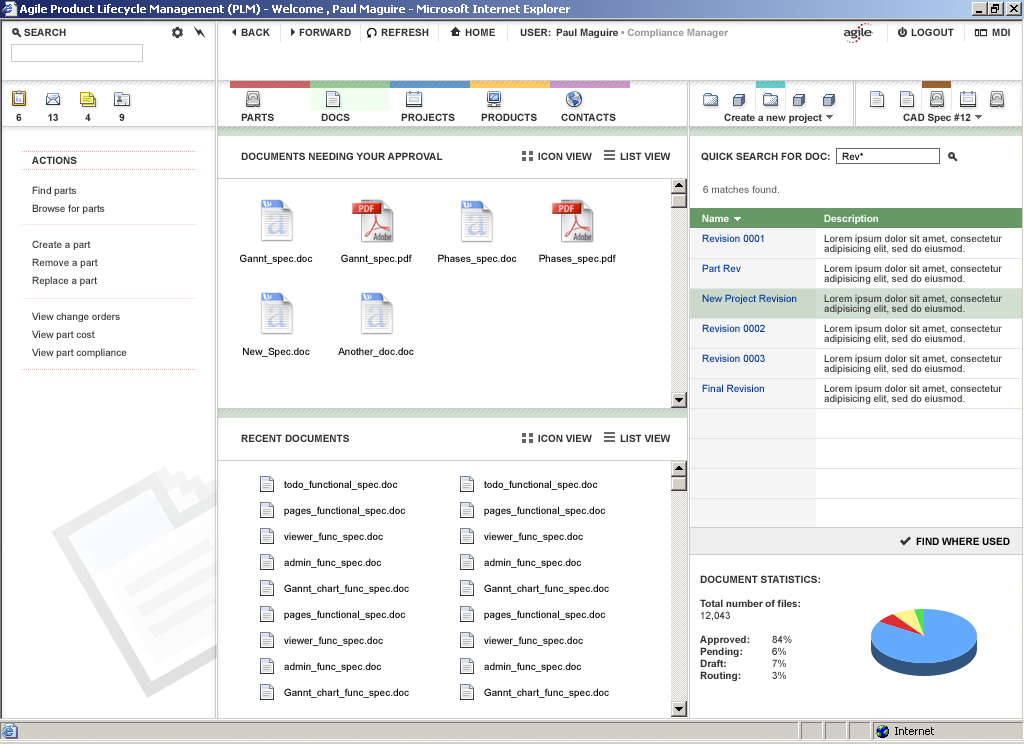
<style>
.page{position:relative;width:1024px;height:744px;background:#ffffff}
.page>*{position:absolute;margin:0}
.t1{font:10px "Arial-BoldMT";color:#333333}
.t2{font:10px "ArialMT"}
.t3{font:10px "ArialMT";color:#666666}
.t4{font:10px "Arial-BoldMT";color:#ffffff}
.t5{font:10px/10px "ArialMT";color:#003399}
.t6{font:10px/10px "ArialMT";color:#333333}
.t7{font:10px "ArialMT";color:#000000}
.t8{font:10px/26px "ArialMT";color:#000000}
.t9{font:10px "Arial-BoldMT";color:#000000}
.t10{font:10px/12px "Arial-BoldMT";color:#333333}
.t11{font:10px/12px "ArialMT";color:#333333}
</style>
<div class="page">
<p class="t1" style="left:241px;top:152px;width:202px;height:8px">DOCUMENTS NEEDING YOUR APPROVAL</p>
<p class="t1" style="left:538px;top:152px;width:54px;height:8px">ICON VIEW</p>
<p class="t1" style="left:620px;top:152px;width:51px;height:8px">LIST VIEW</p>
<p class="t1" style="left:701px;top:152px;width:129px;height:9px">QUICK SEARCH FOR DOC:</p>
<p class="t2" style="left:842px;top:152px;width:22px;height:8px">Rev*</p>
<p class="t3" style="left:703px;top:185px;width:76px;height:8px">6 matches found.</p>
<p class="t4" style="left:702px;top:214px;width:27px;height:8px">Name</p>
<p class="t4" style="left:824px;top:214px;width:54px;height:10px">Description</p>
<p class="t5" style="left:702px;top:234px;width:95px;height:158px">Revision 0001<br><br><br>Part Rev<br><br><br>New Project Revision<br><br><br>Revision 0002<br><br><br>Revision 0003<br><br><br>Final Revision</p>
<p class="t6" style="left:824px;top:234px;width:178px;height:170px">Lorem ipsum dolor sit amet, consectetur <br>adipisicing elit, sed do eiusmod.<br><br>Lorem ipsum dolor sit amet, consectetur <br>adipisicing elit, sed do eiusmod.<br><br>Lorem ipsum dolor sit amet, consectetur <br>adipisicing elit, sed do eiusmod.<br><br>Lorem ipsum dolor sit amet, consectetur <br>adipisicing elit, sed do eiusmod.<br><br>Lorem ipsum dolor sit amet, consectetur <br>adipisicing elit, sed do eiusmod.<br><br>Lorem ipsum dolor sit amet, consectetur <br>adipisicing elit, sed do eiusmod.</p>
<p class="t7" style="left:240px;top:254px;width:73px;height:10px">Gannt_spec.doc</p>
<p class="t7" style="left:341px;top:254px;width:71px;height:10px">Gannt_spec.pdf</p>
<p class="t7" style="left:438px;top:254px;width:79px;height:10px">Phases_spec.doc</p>
<p class="t7" style="left:539px;top:254px;width:77px;height:10px">Phases_spec.pdf</p>
<p class="t7" style="left:243px;top:347px;width:67px;height:10px">New_Spec.doc</p>
<p class="t7" style="left:338px;top:347px;width:76px;height:10px">Another_doc.doc</p>
<p class="t1" style="left:241px;top:434px;width:108px;height:8px">RECENT DOCUMENTS</p>
<p class="t1" style="left:538px;top:434px;width:54px;height:8px">ICON VIEW</p>
<p class="t1" style="left:620px;top:434px;width:51px;height:8px">LIST VIEW</p>
<p class="t8" style="left:284px;top:480px;width:125px;height:218px">todo_functional_spec.doc<br>pages_functional_spec.doc<br>viewer_func_spec.doc<br>admin_func_spec.doc<br>Gannt_chart_func_spec.doc<br>pages_functional_spec.doc<br>viewer_func_spec.doc<br>admin_func_spec.doc<br>Gannt_chart_func_spec.doc</p>
<p class="t8" style="left:484px;top:480px;width:125px;height:218px">todo_functional_spec.doc<br>pages_functional_spec.doc<br>viewer_func_spec.doc<br>admin_func_spec.doc<br>Gannt_chart_func_spec.doc<br>pages_functional_spec.doc<br>viewer_func_spec.doc<br>admin_func_spec.doc<br>Gannt_chart_func_spec.doc</p>
<p class="t9" style="left:916px;top:537px;width:94px;height:8px">FIND WHERE USED</p>
<p class="t10" style="left:700px;top:575px;width:120px;height:106px">DOCUMENT STATISTICS:<br><br>Total number of files:<br><span class="t11">12,043<br></span><br>Approved:  <span class="t11">84%<br></span>Pending:  <span class="t11">6%<br></span>Draft:   <span class="t11">7%<br></span>Routing:  <span class="t11">3%</span></p>
</div>
